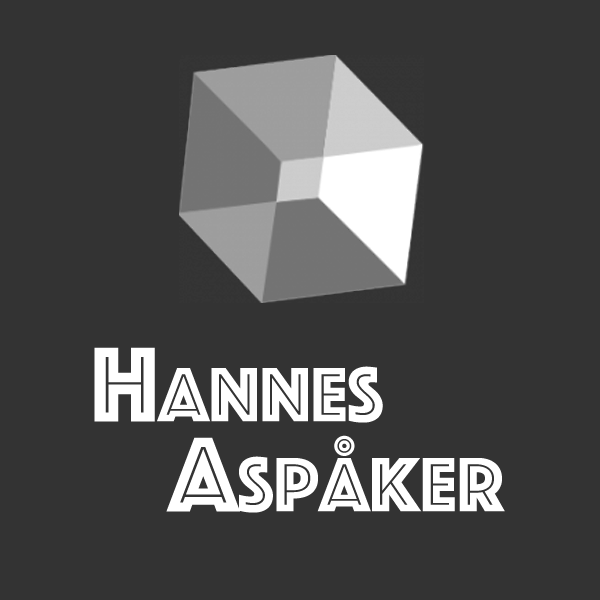
<style>
.page{position:relative;width:600px;height:600px;background:#333333}
.page>*{position:absolute;margin:0}
.t1{font:80px/90px "Phosphate-Inline";color:#ffffff}
.t2{font:110px/90px "Phosphate-Inline";color:#ffffff}
</style>
<div class="page">
<p class="t1" style="left:94px;top:347px;width:411px;height:166px;text-align:center"><span class="t2">H</span>annes<br><span class="t2">         A</span>spåker</p>
</div>
